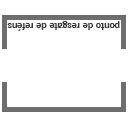
<style>
.page{position:relative;width:128px;height:128px;background:#ffffff}
.page>*{position:absolute;margin:0}
.t1{font:10.3px "NewsGothicBT-Bold";letter-spacing:-0.02em;color:#383838}
</style>
<div class="page">
<p class="t1" style="left:7px;top:21px;width:113px;height:10px;rotate:180deg">ponto de resgate de reféns</p>
</div>
